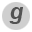
<style>
.page{position:relative;width:32px;height:32px;background:#cfcfcf}
.page>*{position:absolute;margin:0}
.t1{font:23px "Arial-BoldItalicMT";color:#535353}
</style>
<div class="page">
<p class="t1" style="left:9px;top:7px;width:14px;height:17px">g</p>
</div>
